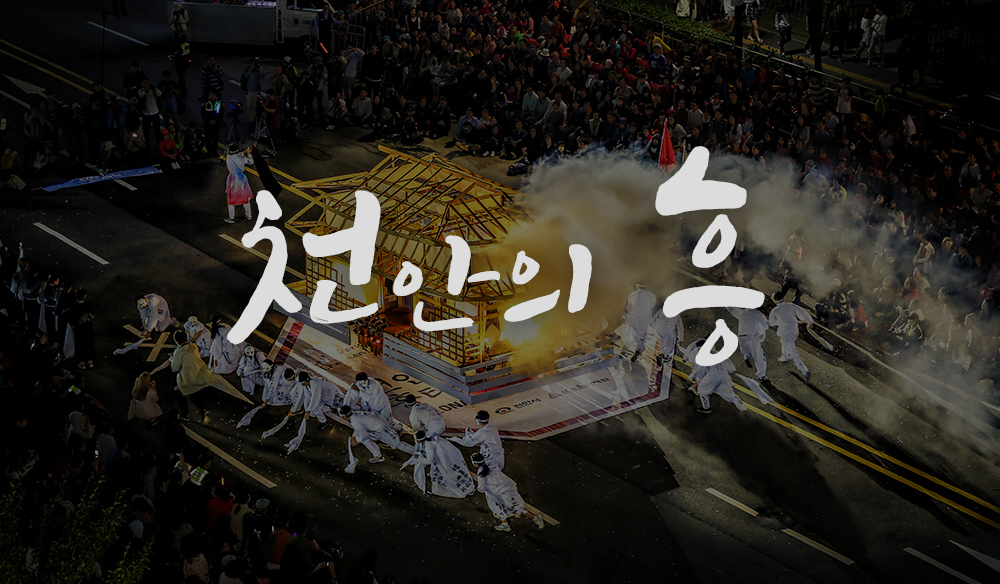
<style>
.page{position:relative;width:1000px;height:584px}
.page>*{position:absolute;margin:0}
.t1{font:145.5px "Makgeolli";letter-spacing:-0.02em;color:#dcdcdc;scale:1.03 1}
.t2{font:213.4px "Makgeolli";letter-spacing:-0.02em;color:#dcdcdc;scale:1.03 1}
.t3{font:242.5px "Makgeolli";letter-spacing:-0.02em;color:#dcdcdc;scale:1.03 1}
</style>
<div class="page">
<p class="t1" style="left:227px;top:146px;width:538px;height:221px"><span class="t2">천</span>안의 <span class="t3">흥</span></p>
</div>
